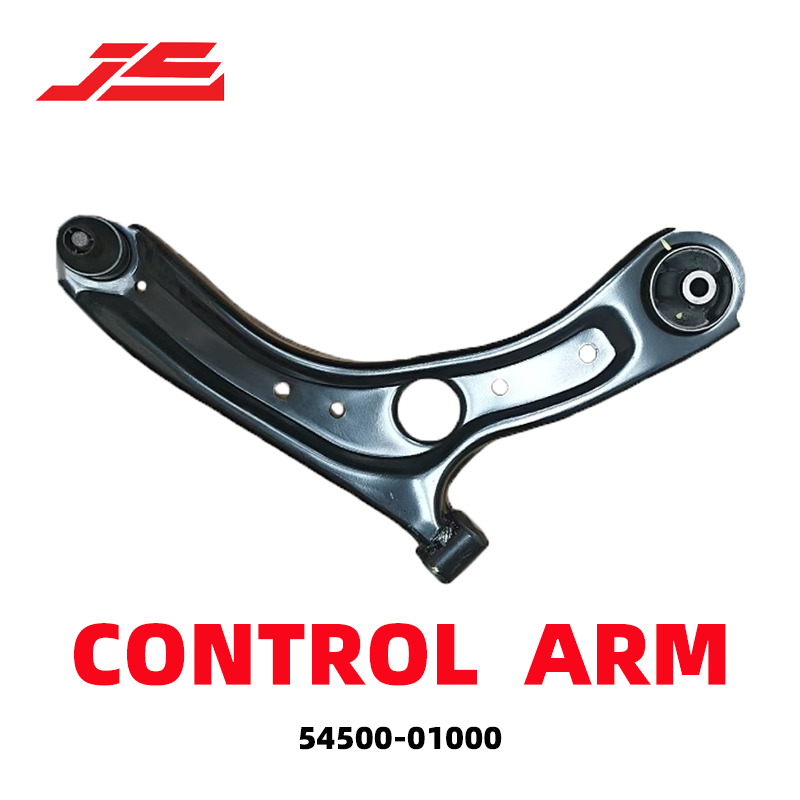
<style>
.page{position:relative;width:800px;height:800px;background:#ffffff}
.page>*{position:absolute;margin:0}
.t1{font:87.6px "AlibabaPuHuiTi_3_115_Black";color:#f8071a}
.t2{font:31.8px "AlibabaPuHuiTi_3_115_Black";color:#000000}
</style>
<div class="page">
<p class="t1" style="left:74px;top:623px;width:652px;height:63px">CONTROL  ARM</p>
<p class="t2" style="left:299px;top:726px;width:203px;height:24px">54500-01000</p>
</div>
